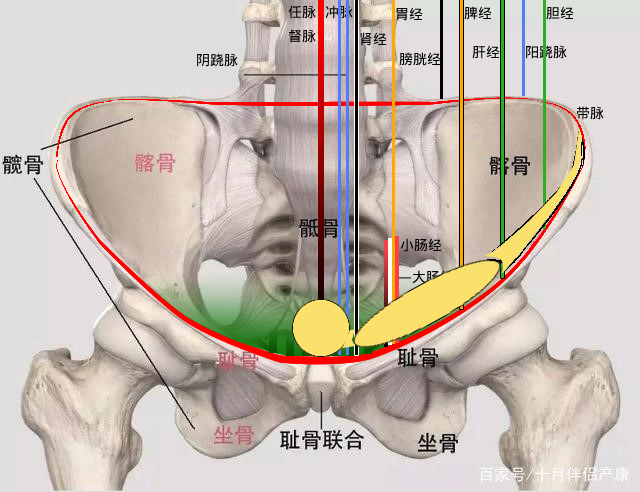
<style>
.page{position:relative;width:640px;height:492px}
.page>*{position:absolute;margin:0}
.t1{font:14px "DroidSansFallback";color:#000000}
.t2{font:14px "DroidSansFallback"}
</style>
<div class="page">
<p class="t1" style="left:288px;top:5px;width:28px;height:14px">任脉</p>
<p class="t1" style="left:325px;top:5px;width:28px;height:14px">冲脉</p>
<p class="t1" style="left:464px;top:6px;width:28px;height:14px">脾经</p>
<p class="t1" style="left:546px;top:6px;width:28px;height:14px">胆经</p>
<p class="t1" style="left:396px;top:7px;width:27px;height:14px">胃经</p>
<p class="t1" style="left:288px;top:29px;width:28px;height:14px">督脉</p>
<p class="t1" style="left:360px;top:32px;width:27px;height:14px">肾经</p>
<p class="t1" style="left:197px;top:53px;width:41px;height:14px">阴跷脉</p>
<p class="t1" style="left:399px;top:52px;width:42px;height:14px">膀胱经</p>
<p class="t1" style="left:472px;top:45px;width:28px;height:14px">肝经</p>
<p class="t1" style="left:526px;top:45px;width:41px;height:14px">阳跷脉</p>
<p class="t1" style="left:576px;top:106px;width:28px;height:14px">带脉</p>
<p class="t1" style="left:400px;top:238px;width:42px;height:14px">小肠经</p>
<p class="t2" style="left:412px;top:270px;width:42px;height:14px">大肠经</p>
</div>
